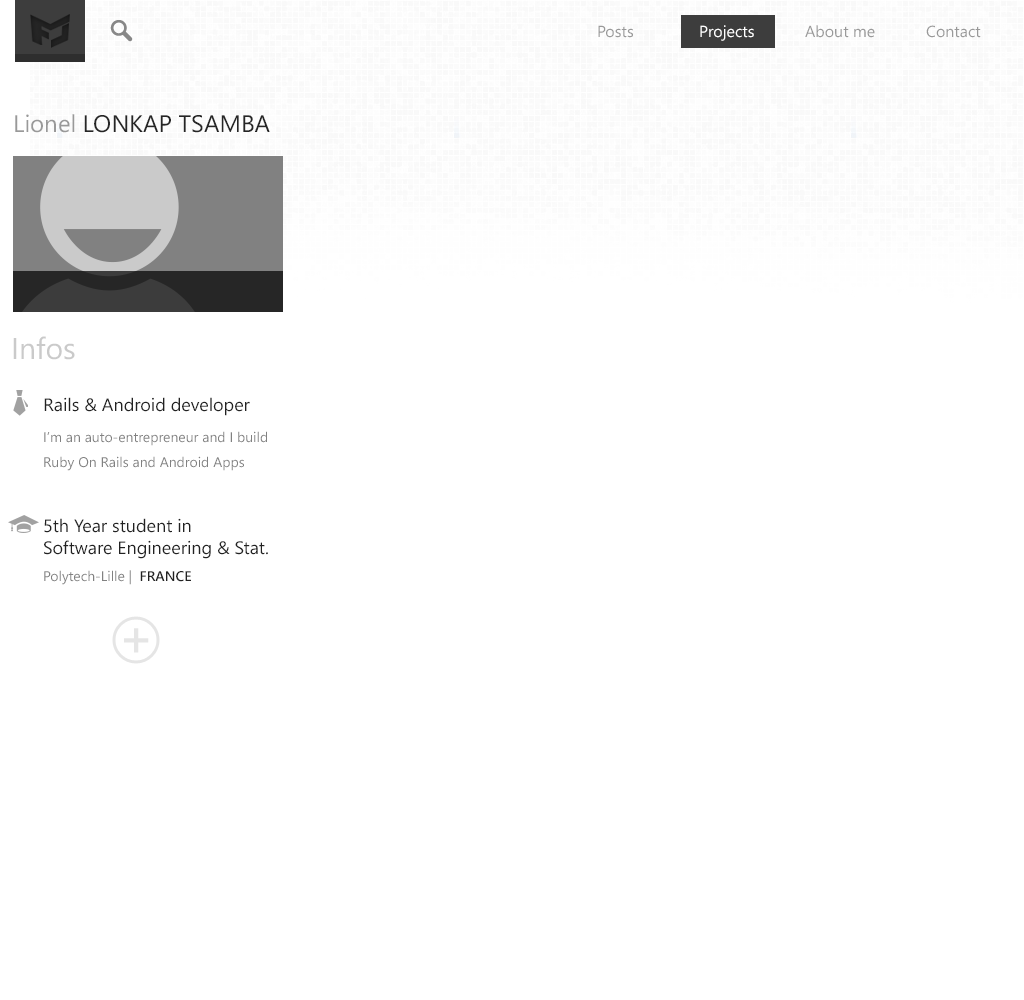
<style>
.page{position:relative;width:1024px;height:1000px;background:#ffffff}
.page>*{position:absolute;margin:0}
.t1{font:16px "SegoeWP";color:#999999}
.t2{font:16px "SegoeWP";color:#ffffff}
.t3{font:24px "SegoeWP";color:#262626}
.t4{font:24px "SegoeWP";color:#999999}
.t5{font:30px "SegoeWP";color:#cacaca}
.t6{font:18px "SegoeWP";color:#222222}
.t7{font:14px/25px "SegoeWP";color:#818181}
.t8{font:14px "SegoeWP";color:#818181}
.t9{font:14px "SegoeWP-Semibold";color:#222222}
</style>
<div class="page">
<p class="t1" style="left:598px;top:25px;width:35px;height:13px">Posts</p>
<p class="t2" style="left:700px;top:25px;width:54px;height:16px">Projects</p>
<p class="t1" style="left:805px;top:25px;width:70px;height:13px">About me</p>
<p class="t1" style="left:926px;top:25px;width:55px;height:13px">Contact</p>
<p class="t3" style="left:15px;top:114px;width:255px;height:19px"><span class="t4">Lionel</span> LONKAP TSAMBA</p>
<p class="t5" style="left:13px;top:336px;width:62px;height:24px">Infos</p>
<p class="t6" style="left:44px;top:397px;width:206px;height:19px">Rails &amp; Android developer</p>
<p class="t7" style="left:44px;top:431px;width:223px;height:40px">I’m an auto-entrepreneur and I build<br>Ruby On Rails and Android Apps</p>
<p class="t6" style="left:44px;top:518px;width:224px;height:41px">5th Year student in <br>Software Engineering &amp; Stat.</p>
<p class="t8" style="left:44px;top:570px;width:147px;height:15px">Polytech-Lille |  <span class="t9">FRANCE</span></p>
</div>
